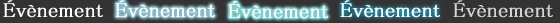
<style>
.page{position:relative;width:560px;height:23px;background:#333333}
.page>*{position:absolute;margin:0}
.t1{font:20.3px "MS-PMincho";color:#ffffff;font-weight:bold;scale:1.05 1}
.t2{font:20.3px "MS-PMincho";color:#d4d4d4;font-weight:bold;scale:1.05 1}
</style>
<div class="page">
<p class="t1" style="left:3px;top:0px;width:100px;height:18px">Évènement</p>
<p class="t1" style="left:115px;top:0px;width:100px;height:18px">Évènement</p>
<p class="t1" style="left:228px;top:1px;width:100px;height:18px">Évènement</p>
<p class="t1" style="left:340px;top:0px;width:100px;height:18px">Évènement</p>
<p class="t2" style="left:453px;top:0px;width:100px;height:18px">Évènement</p>
</div>
